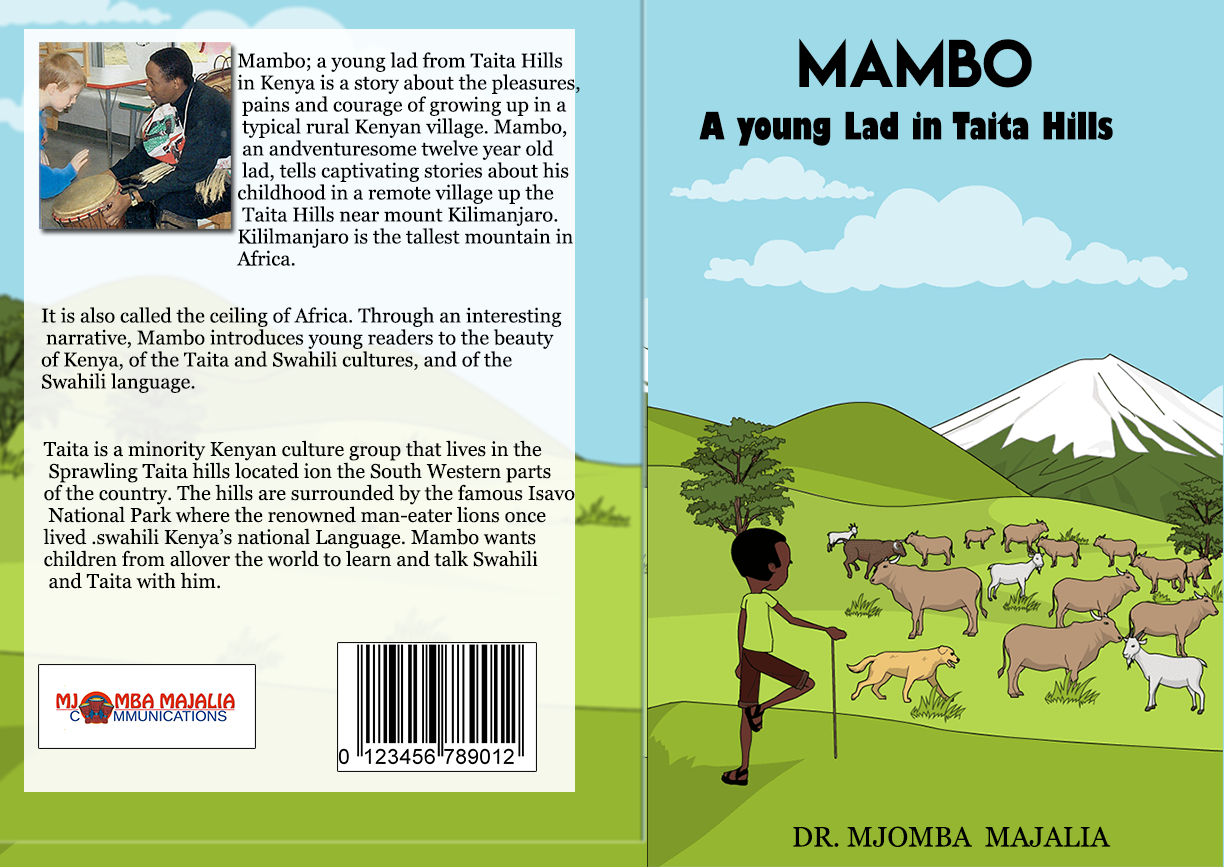
<style>
.page{position:relative;width:1224px;height:867px;background:#9fdae8}
.page>*{position:absolute;margin:0}
.t1{font:60px "LemonMilk";color:#000000}
.t2{font:20px/11px "Georgia";color:#000000}
.t3{font:37px "GillSans-UltraBoldCondensed";color:#000000}
.t4{font:28px "Georgia";color:#000000}
</style>
<div class="page">
<p class="t1" style="left:799px;top:38px;width:233px;height:50px">MAMBO</p>
<p class="t2" style="left:236px;top:52px;width:344px;height:214px">Mambo; a young lad from Taita Hills <br><br>in Kenya is a story about the pleasures,<br><br> pains and courage of growing up in a<br><br> typical rural Kenyan village. Mambo,<br><br> an andventuresome twelve year old<br><br> lad, tells captivating stories about his <br><br>childhood in a remote village up the<br><br> Taita Hills near mount Kilimanjaro. <br><br>Kililmanjaro is the tallest mountain in <br><br>Africa.</p>
<p class="t3" style="left:699px;top:111px;width:414px;height:35px">A young Lad in Taita Hills</p>
<p class="t2" style="left:41px;top:307px;width:521px;height:86px">It is also called the ceiling of Africa. Through an interesting<br><br> narrative, Mambo introduces young readers to the beauty <br><br>of Kenya, of the Taita and Swahili cultures, and of the <br><br>Swahili language.</p>
<p class="t2" style="left:43px;top:440px;width:532px;height:149px">Taita is a minority Kenyan culture group that lives in the<br><br> Sprawling Taita hills located ion the South Western parts <br><br>of the country. The hills are surrounded by the famous Isavo<br><br> National Park where the renowned man-eater lions once <br><br>lived .swahili Kenya’s national Language. Mambo wants <br><br>children from allover the world to learn and talk Swahili<br><br> and Taita with him.</p>
<p class="t4" style="left:793px;top:826px;width:318px;height:21px">DR. MJOMBA  MAJALIA</p>
</div>
